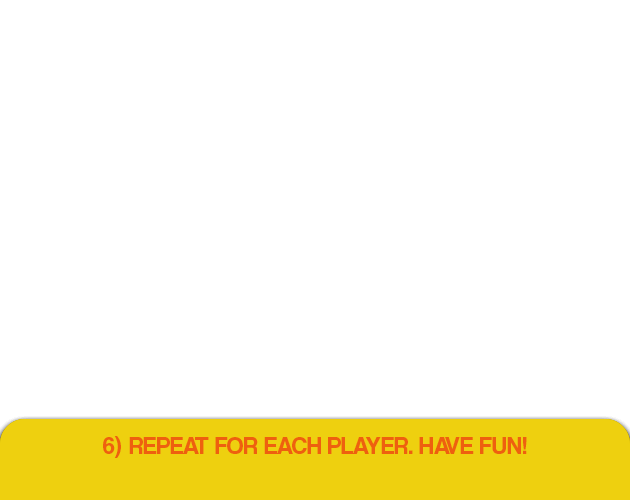
<style>
.page{position:relative;width:630px;height:500px;background:#ffffff}
.page>*{position:absolute;margin:0}
.t1{font:25px "CoolveticaRg-Regular";color:#ee600f;text-transform:uppercase}
</style>
<div class="page">
<p class="t1" style="left:103px;top:436px;width:424px;height:22px">6) Repeat for each player. Have fun!</p>
</div>
